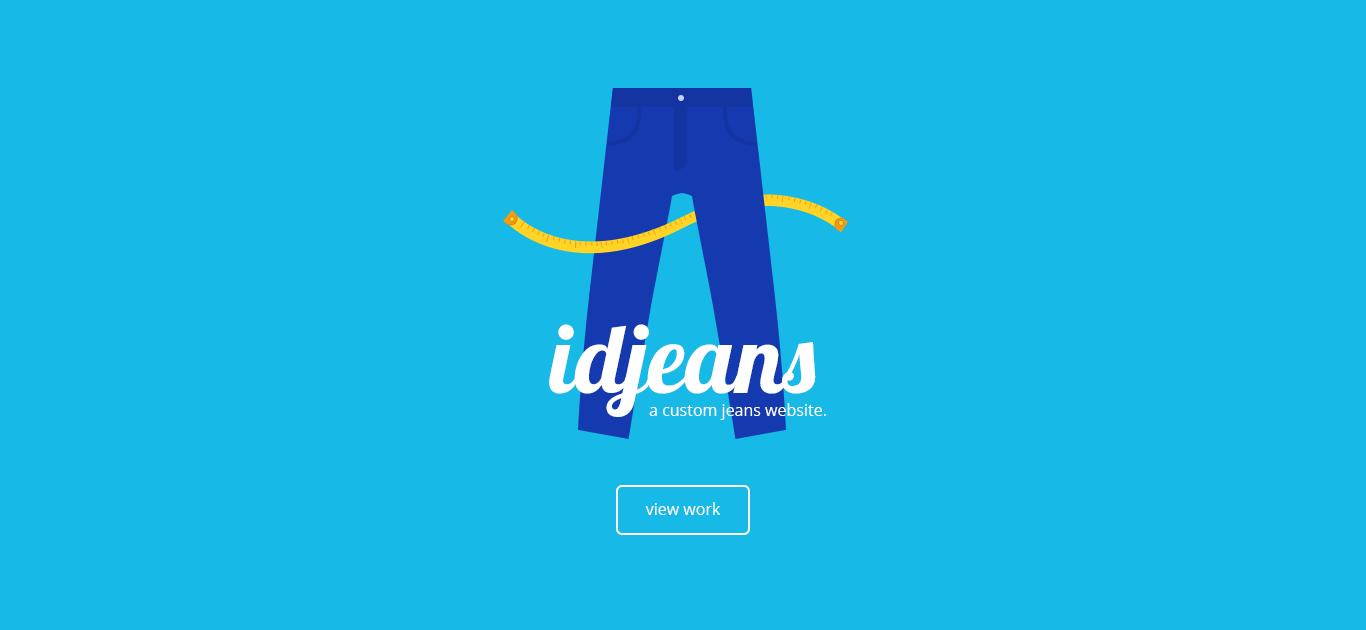
<style>
.page{position:relative;width:1366px;height:630px;background:#17b9e6}
.page>*{position:absolute;margin:0}
.t1{font:96px "Lobster";color:#ffffff}
.t2{font:16px "OpenSans";color:#ffffff}
</style>
<div class="page">
<p class="t1" style="left:549px;top:324px;width:267px;height:93px">idjeans</p>
<p class="t2" style="left:649px;top:403px;width:177px;height:17px">a custom jeans website.</p>
<p class="t2" style="left:645px;top:502px;width:76px;height:13px">view work</p>
</div>
